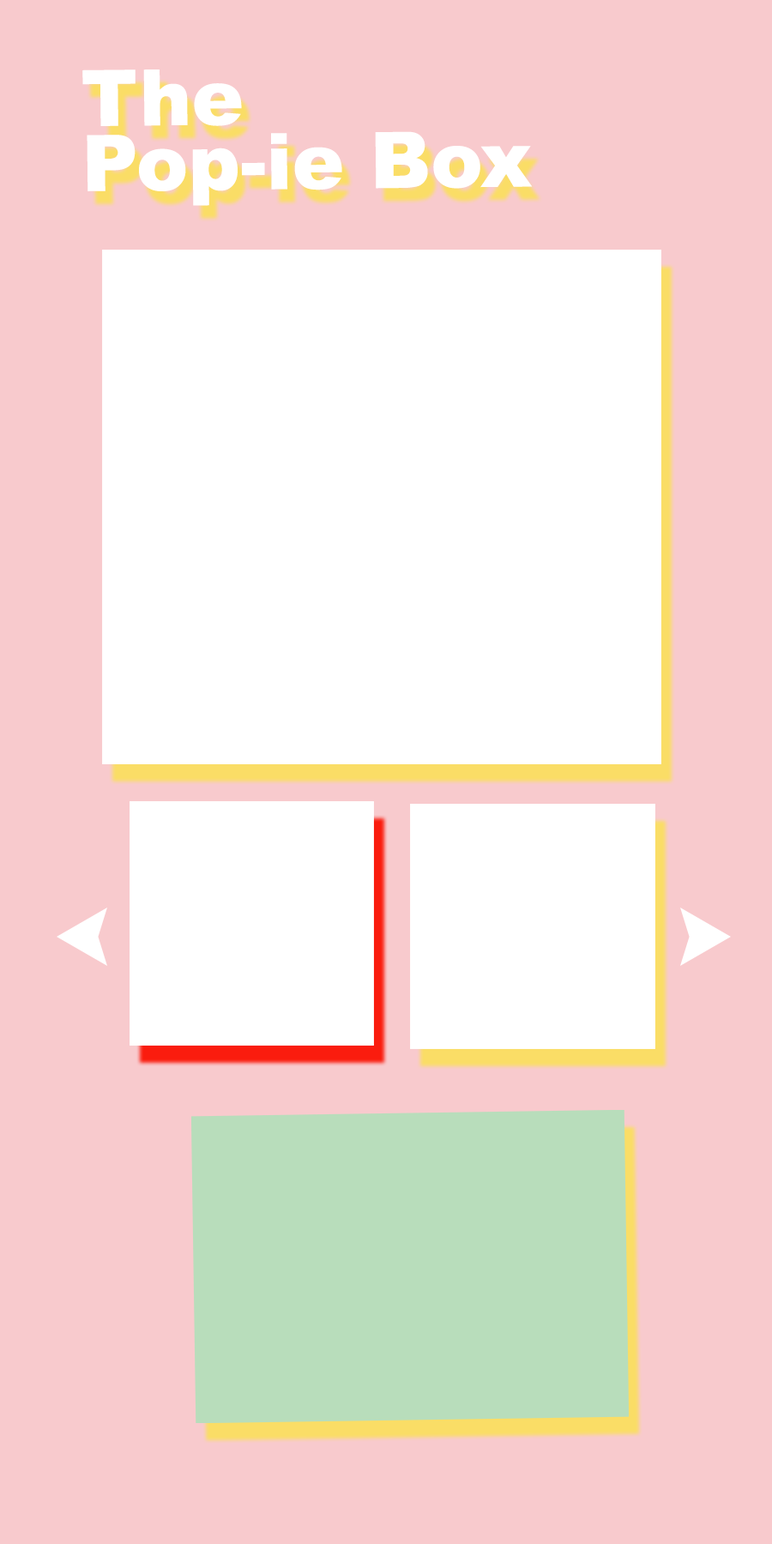
<style>
.page{position:relative;width:772px;height:1544px;background:#f8cacd}
.page>*{position:absolute;margin:0}
.t1{font:78px/65px "Arial-Black";color:#ffffff}
</style>
<div class="page">
<p class="t1" style="left:82px;top:69px;width:451px;height:137px;rotate:-1deg">The<br>Pop-ie Box</p>
</div>
